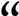
<style>
.page{position:relative;width:19px;height:16px;background:#ffffff}
.page>*{position:absolute;margin:0}
.t1{font:60px "Constantia";color:#000000}
</style>
<div class="page">
<p class="t1" style="left:1px;top:1px;width:18px;height:15px">“</p>
</div>
